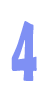
<style>
.page{position:relative;width:50px;height:110px;background:#ffffff}
.page>*{position:absolute;margin:0}
.t1{font:96px "BerlinSansFBDemi-Bold";color:#7f90f4;scale:0.5 1}
</style>
<div class="page">
<p class="t1" style="left:11px;top:21px;width:26px;height:60px">4</p>
</div>
